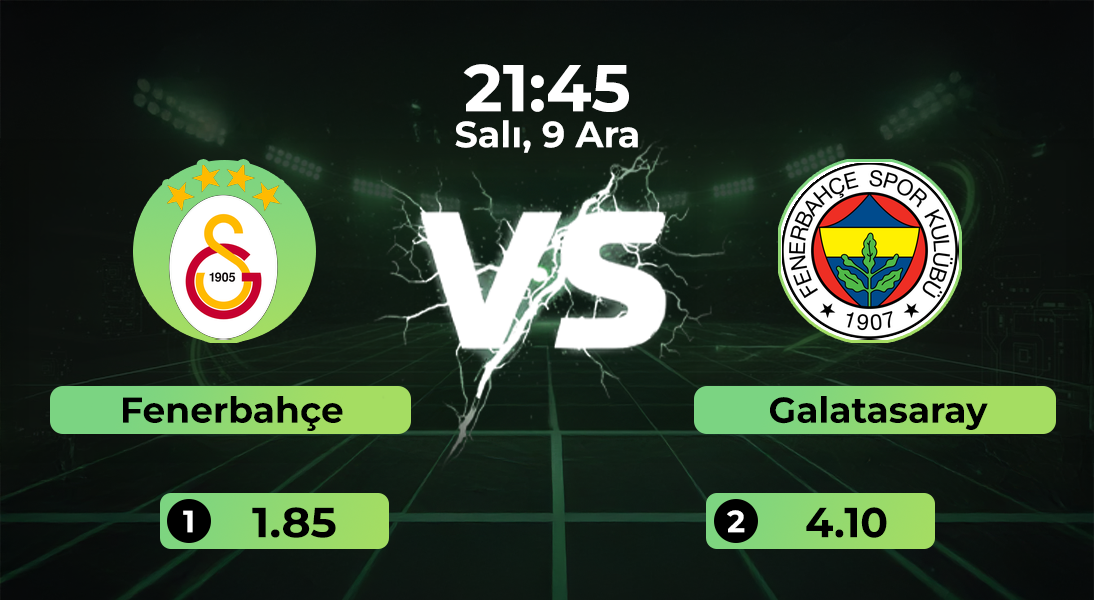
<style>
.page{position:relative;width:1094px;height:600px}
.page>*{position:absolute;margin:0}
.t1{font:66.1px "Montserrat-Bold";color:#ffffff}
.t2{font:36.5px "Montserrat-Bold";color:#ffffff}
.t3{font:36px "Montserrat-Bold";color:#000000}
.t4{font:30.8px "Montserrat-Bold";color:#ffffff}
.t5{font:42px "Montserrat-Bold";color:#000000;scale:1.05 1}
.t6{font:42px "Montserrat-Bold";color:#000000}
</style>
<div class="page">
<p class="t1" style="left:463px;top:64px;width:166px;height:48px">21:45</p>
<p class="t2" style="left:455px;top:120px;width:183px;height:33px">Salı, 9 Ara</p>
<p class="t3" style="left:123px;top:396px;width:220px;height:35px">Fenerbahçe</p>
<p class="t3" style="left:770px;top:396px;width:218px;height:34px">Galatasaray</p>
<p class="t4" style="left:183px;top:510px;width:10px;height:23px">1</p>
<p class="t5" style="left:252px;top:507px;width:84px;height:31px">1.85</p>
<p class="t4" style="left:727px;top:510px;width:18px;height:23px">2</p>
<p class="t6" style="left:806px;top:507px;width:81px;height:31px">4.10</p>
</div>
